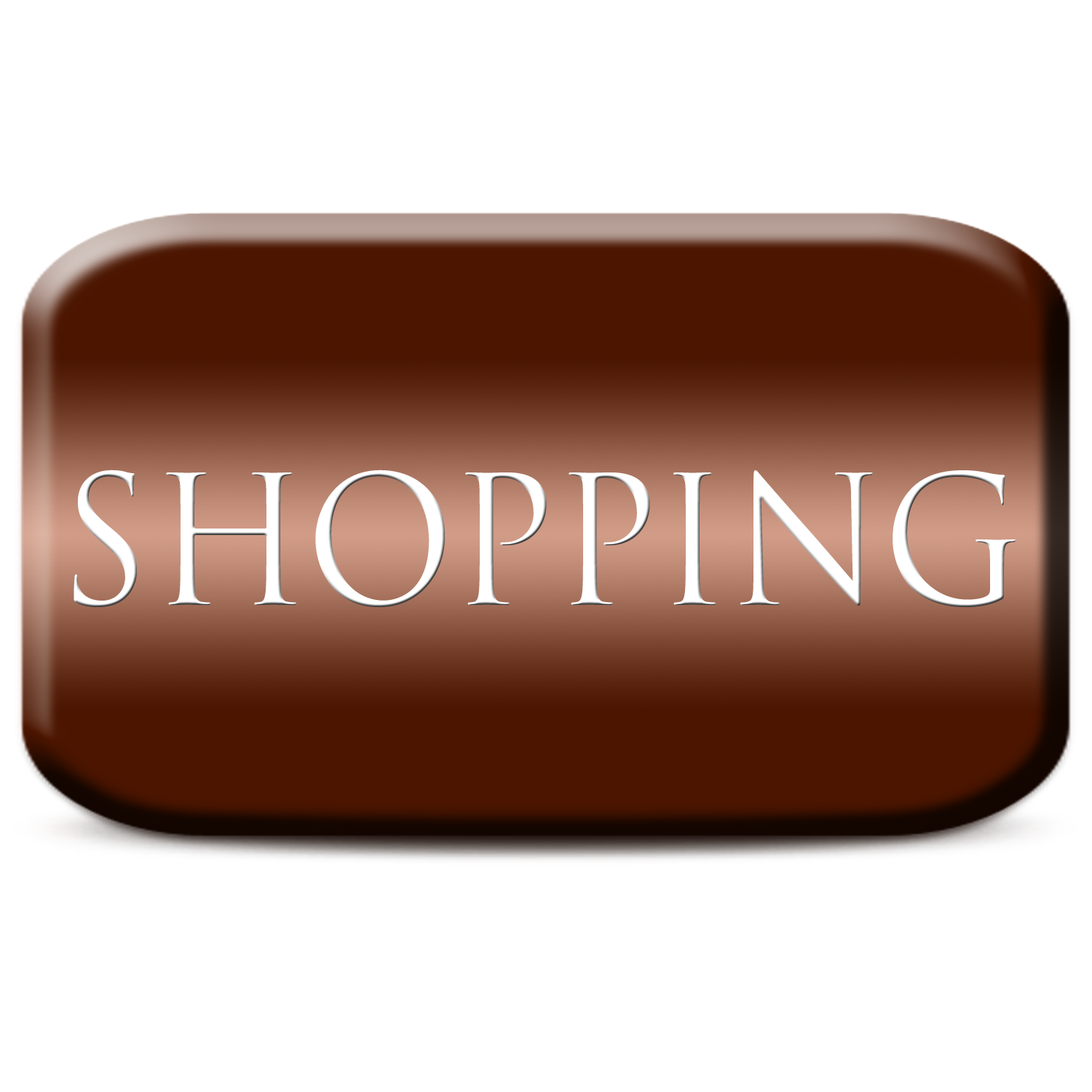
<style>
.page{position:relative;width:1092px;height:1092px;background:#ffffff}
.page>*{position:absolute;margin:0}
.t1{font:174.4px "TrajanPro-Regular";color:#ffffff;scale:0.94 1}
</style>
<div class="page">
<p class="t1" style="left:74px;top:470px;width:942px;height:137px">SHOPPING</p>
</div>
